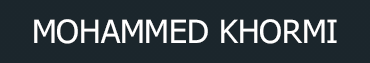
<style>
.page{position:relative;width:370px;height:63px;background:#1b262c}
.page>*{position:absolute;margin:0}
.t1{font:32px "Tahoma";color:#ffffff}
</style>
<div class="page">
<p class="t1" style="left:34px;top:19px;width:303px;height:25px">MOHAMMED KHORMI</p>
</div>
